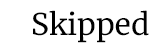
<style>
.page{position:relative;width:156px;height:50px;background:#ffffff}
.page>*{position:absolute;margin:0}
.t1{font:29.7px "Merriweather-Regular";color:#000000}
</style>
<div class="page">
<p class="t1" style="left:32px;top:10px;width:117px;height:33px">Skipped</p>
</div>
